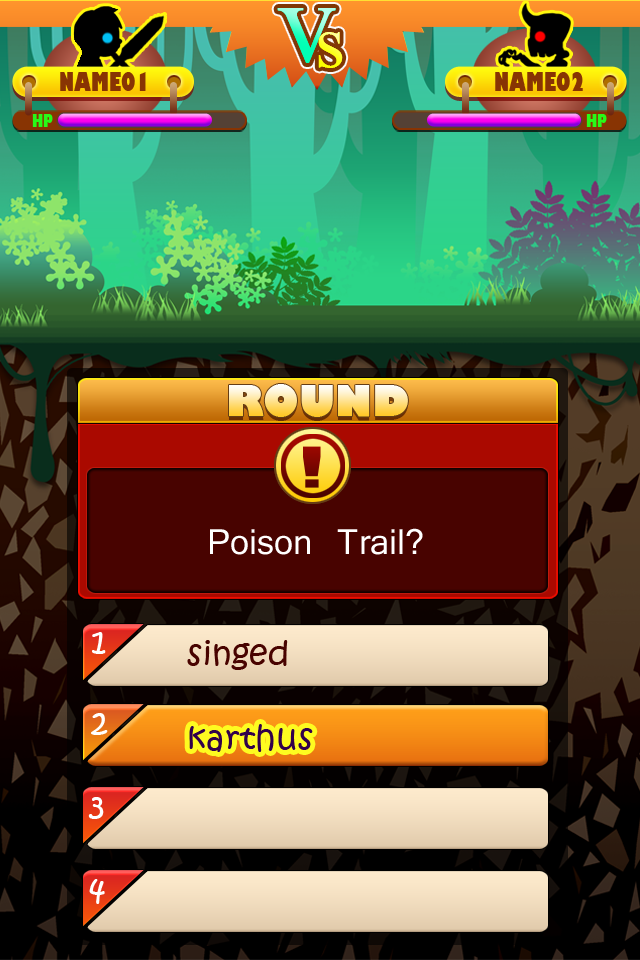
<style>
.page{position:relative;width:640px;height:960px}
.page>*{position:absolute;margin:0}
.t1{font:25px "GillSans-UltraBoldCondensed";color:#883403}
.t2{font:16.7px "GillSans-UltraBoldCondensed";color:#28fa18}
.t3{font:41.7px "GillSans-UltraBold"}
.t4{font:33.3px "Kartika";color:#ffffff}
.t5{font:33.3px "KristenITC-Regular";color:#ffffff}
.t6{font:33.3px "KristenITC-Regular";color:#480300}
.t7{font:33.3px "KristenITC-Regular";color:#32004b}
</style>
<div class="page">
<p class="t1" style="left:60px;top:72px;width:86px;height:19px">NAME01</p>
<p class="t1" style="left:495px;top:72px;width:88px;height:19px">NAME02</p>
<p class="t2" style="left:32px;top:114px;width:21px;height:13px">HP</p>
<p class="t2" style="left:586px;top:114px;width:21px;height:13px">HP</p>
<p class="t3" style="left:229px;top:384px;width:179px;height:33px">ROUND</p>
<p class="t4" style="left:210px;top:528px;width:213px;height:27px">Poison Trail?</p>
<p class="t5" style="left:92px;top:632px;width:14px;height:22px">1</p>
<p class="t6" style="left:187px;top:640px;width:101px;height:30px">singed</p>
<p class="t5" style="left:91px;top:713px;width:17px;height:22px">2</p>
<p class="t7" style="left:189px;top:724px;width:124px;height:28px">karthus</p>
<p class="t5" style="left:88px;top:797px;width:16px;height:22px">3</p>
<p class="t5" style="left:89px;top:879px;width:16px;height:25px">4</p>
</div>
